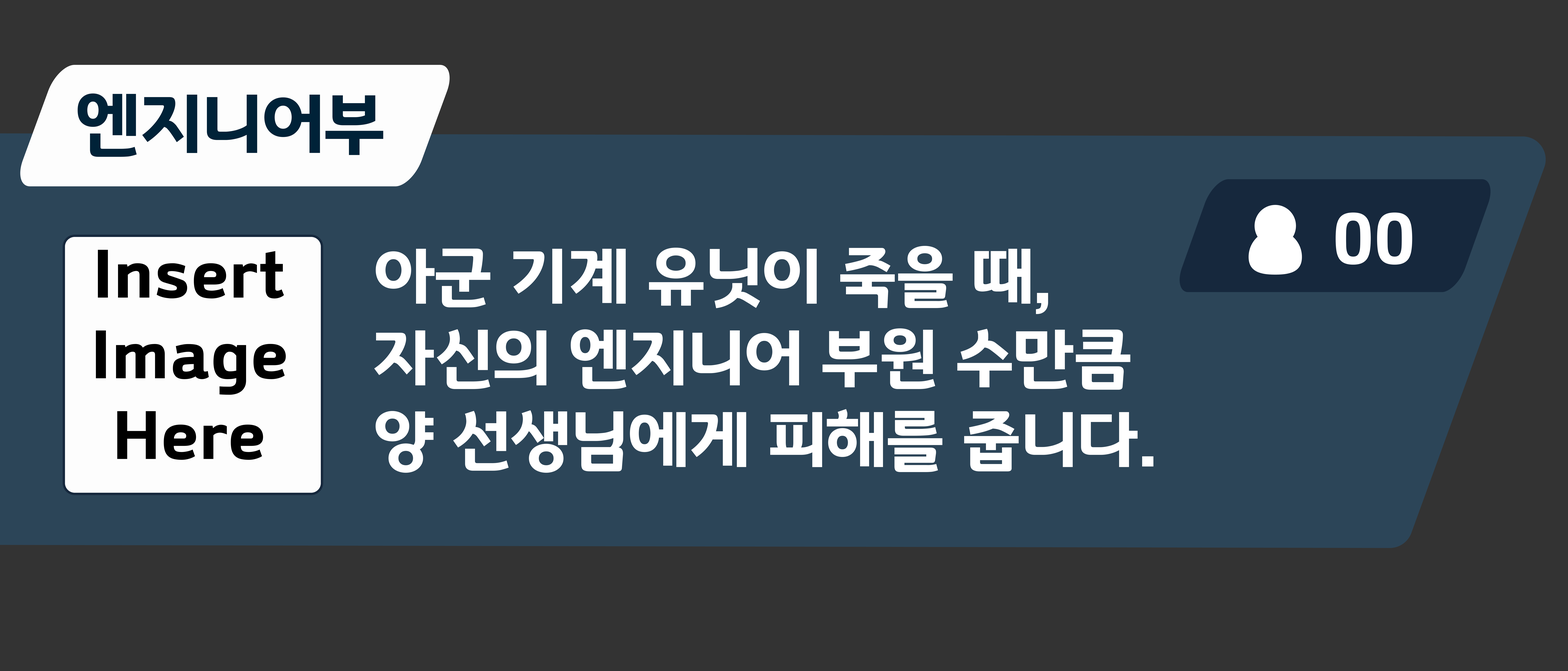
<style>
.page{position:relative;width:1568px;height:671px;background:#333333}
.page>*{position:absolute;margin:0}
.t1{font:72.2px "GyeonggiTitleB";color:#002238}
.t2{font:70.4px "GyeonggiTitleB";color:#ffffff}
.t3{font:68.1px "GyeonggiTitleB";color:#ffffff}
.t4{font:67.2px "GyeonggiTitleB";color:#000000}
</style>
<div class="page">
<p class="t1" style="left:78px;top:93px;width:305px;height:64px">엔지니어부</p>
<p class="t2" style="left:1336px;top:213px;width:76px;height:52px">00</p>
<p class="t3" style="left:374px;top:246px;width:779px;height:227px">아군 기계 유닛이 죽을 때,<br>자신의 엔지니어 부원 수만큼<br>양 선생님에게 피해를 줍니다.</p>
<p class="t4" style="left:96px;top:250px;width:190px;height:210px;text-align:center">Insert<br>Image<br>Here</p>
</div>
